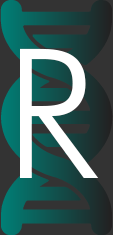
<style>
.page{position:relative;width:113px;height:235px;background:#333333}
.page>*{position:absolute;margin:0}
.t1{font:180px "FuturaBT-Light";color:#ffffff}
</style>
<div class="page">
<p class="t1" style="left:20px;top:48px;width:79px;height:130px">R</p>
</div>
